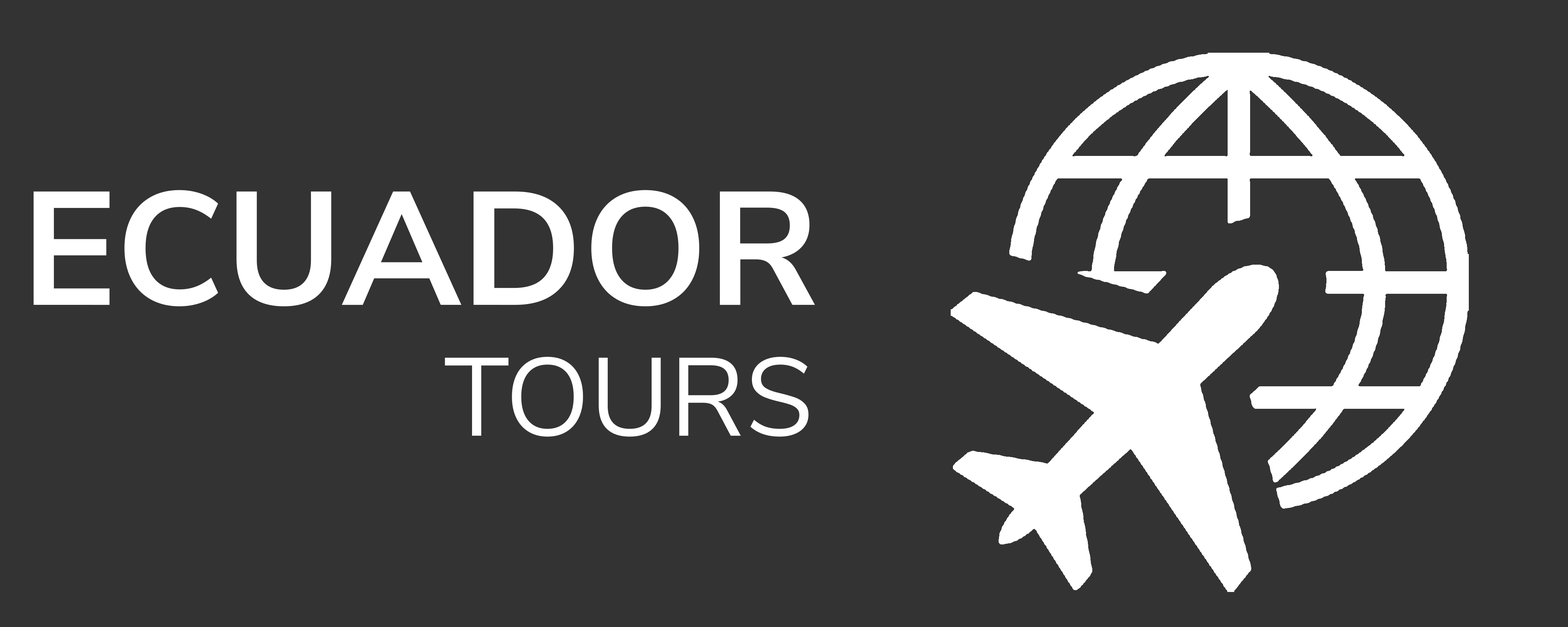
<style>
.page{position:relative;width:1568px;height:627px;background:#333333}
.page>*{position:absolute;margin:0}
.t1{font:160.8px "NunitoSans-Bold";color:#ffffff}
.t2{font:110.6px "NunitoSans-Regular";color:#ffffff}
</style>
<div class="page">
<p class="t1" style="left:34px;top:190px;width:781px;height:116px">ECUADOR</p>
<p class="t2" style="left:445px;top:357px;width:364px;height:80px">TOURS</p>
</div>
